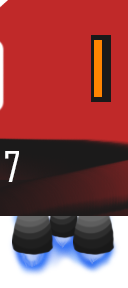
<style>
.page{position:relative;width:128px;height:288px;background:#c02929}
.page>*{position:absolute;margin:0}
.t1{font:43.8px "Bahnschrift-LightCondensed";color:#ffffff}
</style>
<div class="page">
<p class="t1" style="left:5px;top:151px;width:14px;height:31px">7</p>
</div>
